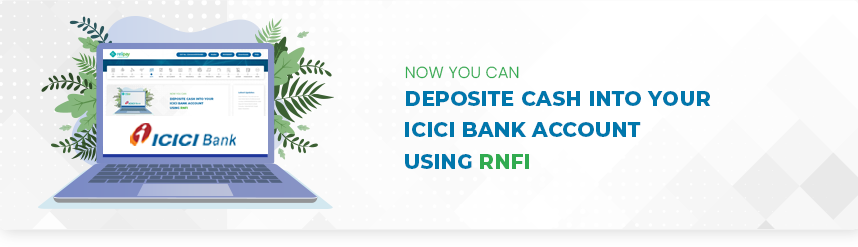
<style>
.page{position:relative;width:858px;height:247px}
.page>*{position:absolute;margin:0}
.t1{font:16px "Poppins-Light";letter-spacing:0.014em;color:#31ab50;text-transform:uppercase}
.t2{font:20.2px "Montserrat-ExtraBold";letter-spacing:0.014em;color:#0077ac;text-transform:uppercase}
.t3{font:20.2px "Montserrat-ExtraBold";letter-spacing:0.014em;color:#31ab50;text-transform:uppercase}
</style>
<div class="page">
<p class="t1" style="left:405px;top:66px;width:114px;height:13px">Now You can</p>
<p class="t2" style="left:406px;top:91px;width:305px;height:15px">deposite cash into your</p>
<p class="t2" style="left:405px;top:122px;width:236px;height:15px">ICICI Bank account</p>
<p class="t3" style="left:405px;top:154px;width:124px;height:15px"><span class="t2">using </span>RNFI portal</p>
</div>
